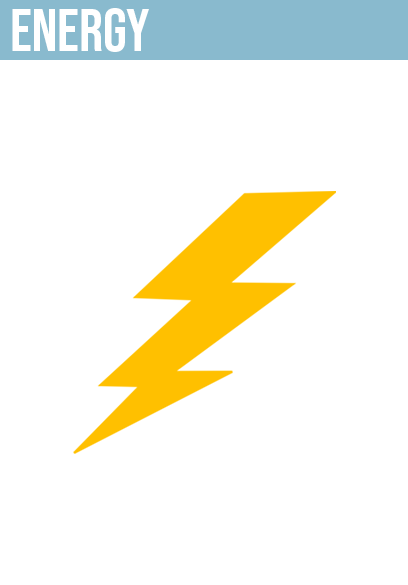
<style>
.page{position:relative;width:408px;height:585px;background:#ffffff}
.page>*{position:absolute;margin:0}
.t1{font:60px "BebasNeue-Regular";color:#ffffff}
</style>
<div class="page">
<p class="t1" style="left:12px;top:8px;width:137px;height:44px">energy</p>
</div>
